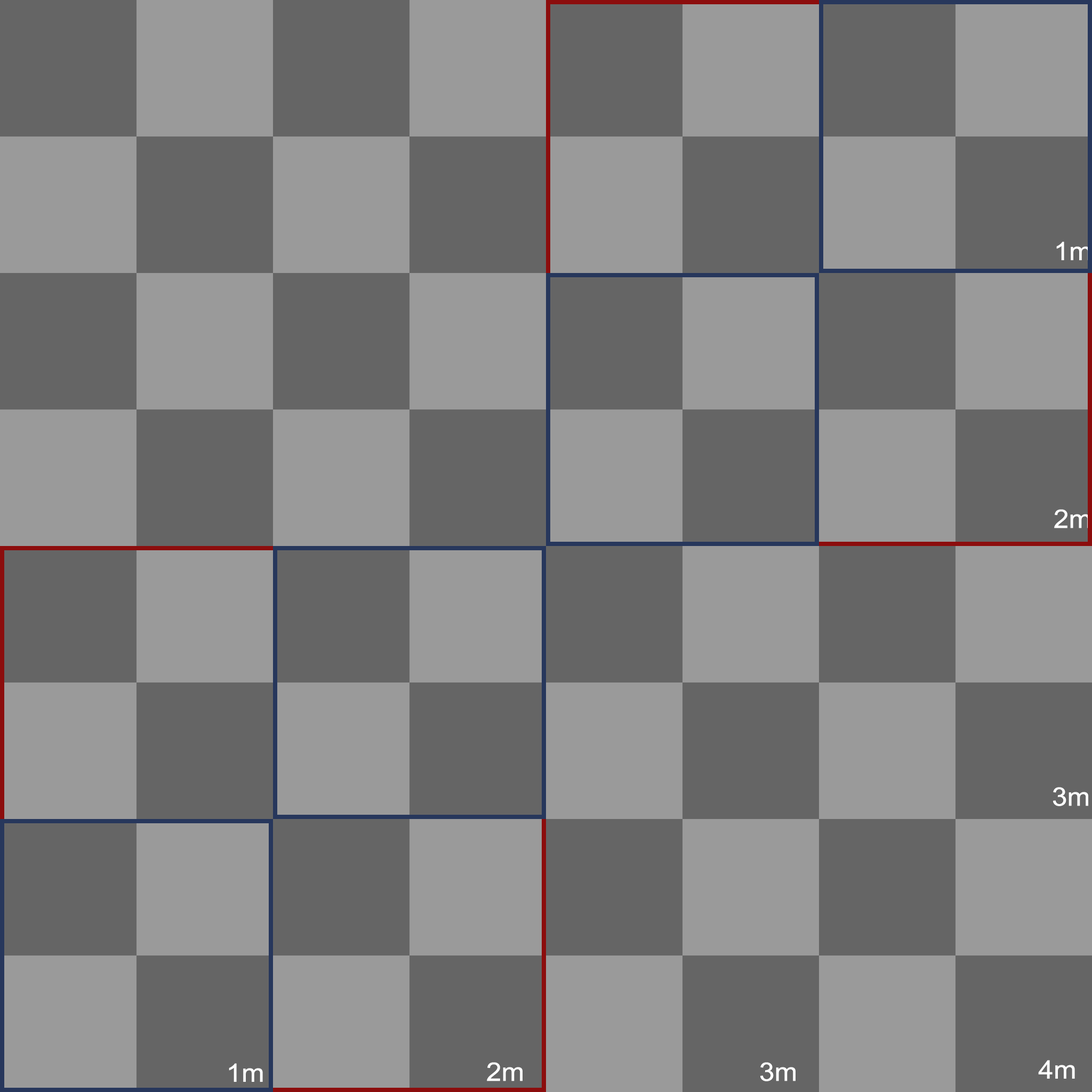
<style>
.page{position:relative;width:1092px;height:1092px;background:#9a9a9a}
.page>*{position:absolute;margin:0}
.t1{font:25.6px "ArialMT";color:#ffffff;scale:1.07 1}
</style>
<div class="page">
<p class="t1" style="left:1056px;top:242px;width:34px;height:18px">1m</p>
<p class="t1" style="left:1054px;top:509px;width:36px;height:19px">2m</p>
<p class="t1" style="left:1053px;top:787px;width:35px;height:19px">3m</p>
<p class="t1" style="left:1038px;top:1060px;width:37px;height:19px">4m</p>
<p class="t1" style="left:229px;top:1063px;width:34px;height:19px">1m</p>
<p class="t1" style="left:487px;top:1062px;width:36px;height:19px">2m</p>
<p class="t1" style="left:760px;top:1062px;width:36px;height:19px">3m</p>
</div>
